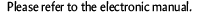
<style>
.page{position:relative;width:200px;height:14px;background:#ffffff}
.page>*{position:absolute;margin:0}
.t1{font:13.2px "Amira-Roman";color:#000000;scale:0.91 1}
</style>
<div class="page">
<p class="t1" style="left:7px;top:1px;width:185px;height:11px">Please refer to the electronic manual.</p>
</div>
